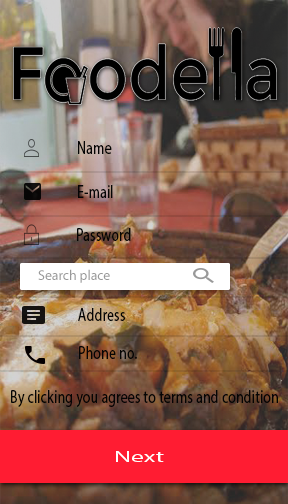
<style>
.page{position:relative;width:288px;height:504px}
.page>*{position:absolute;margin:0}
.t1{font:18.2px "MyriadPro-Regular";letter-spacing:0.014em;color:#000000;scale:0.76 1}
.t2{font:14.2px "MyriadPro-Regular";color:#999999;scale:0.97 1}
.t3{font:18.2px "MyriadPro-Regular";letter-spacing:0.014em;color:#999494;scale:0.76 1}
.t4{font:15.5px "MyriadPro-Regular";letter-spacing:0.014em;color:#ffffff;scale:1.61 1}
</style>
<div class="page">
<p class="t1" style="left:78px;top:141px;width:34px;height:13px">Name</p>
<p class="t1" style="left:78px;top:185px;width:35px;height:13px">E-mail</p>
<p class="t1" style="left:77px;top:228px;width:54px;height:13px">Password</p>
<p class="t2" style="left:38px;top:269px;width:72px;height:14px">Search place</p>
<p class="t1" style="left:78px;top:308px;width:47px;height:13px">Address</p>
<p class="t1" style="left:79px;top:346px;width:58px;height:13px">Phone no.</p>
<p class="t1" style="left:11px;top:390px;width:267px;height:17px">By clicking you agrees to <span class="t3">terms</span> and condition</p>
<p class="t4" style="left:116px;top:451px;width:48px;height:11px">Next</p>
</div>
